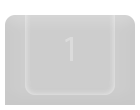
<style>
.page{position:relative;width:140px;height:110px;background:#cdcdcd}
.page>*{position:absolute;margin:0}
.t1{font:36px "MyriadPro-Regular";color:#dbdbdb}
</style>
<div class="page">
<p class="t1" style="left:65px;top:37px;width:8px;height:24px">1</p>
</div>
